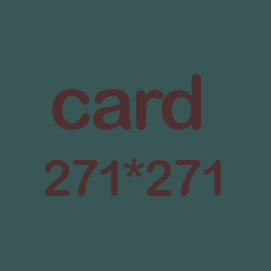
<style>
.page{position:relative;width:271px;height:271px;background:#3a5757}
.page>*{position:absolute;margin:0}
.t1{font:49.8px/66.4px "ArialRoundedMTBold";letter-spacing:-0.04em;color:#4f2f2f}
.t2{font:74.7px/66.4px "ArialRoundedMTBold";letter-spacing:-0.04em;color:#4f2f2f}
</style>
<div class="page">
<p class="t1" style="left:44px;top:74px;width:177px;height:122px;text-align:center"><span class="t2">card </span><br>271*271</p>
</div>
